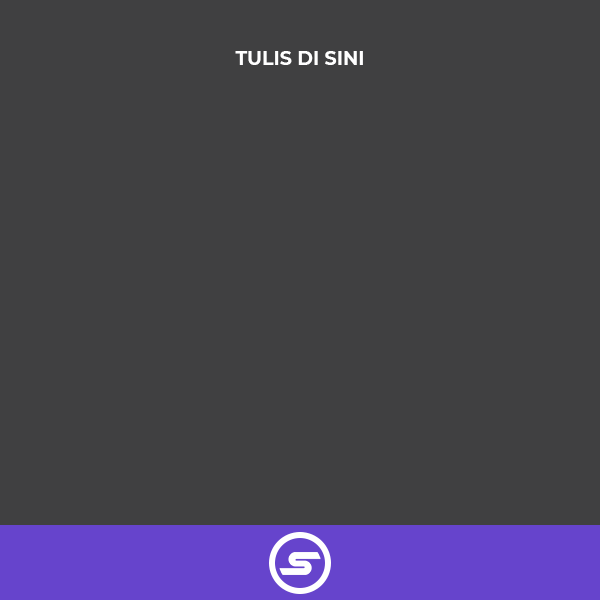
<style>
.page{position:relative;width:600px;height:600px;background:#404041}
.page>*{position:absolute;margin:0}
.t1{font:19px "Montserrat-Bold";color:#ffffff;text-transform:uppercase}
</style>
<div class="page">
<p class="t1" style="left:235px;top:51px;width:128px;height:14px">TULIS DI SINI</p>
</div>
